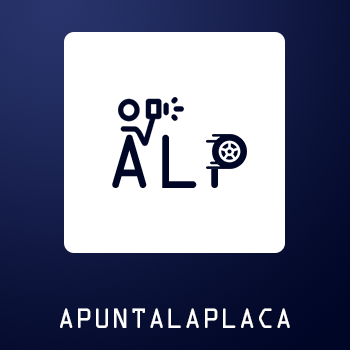
<style>
.page{position:relative;width:350px;height:350px;background:#ffffff}
.page>*{position:absolute;margin:0}
.t1{font:30px "OCRAExtended";color:#ffffff}
</style>
<div class="page">
<p class="t1" style="left:60px;top:308px;width:230px;height:20px">APUNTALAPLACA</p>
</div>
